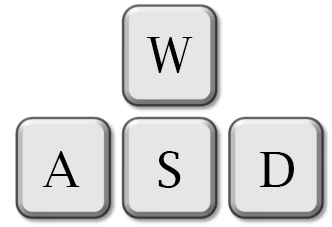
<style>
.page{position:relative;width:332px;height:227px;background:#ffffff}
.page>*{position:absolute;margin:0}
.t1{font:48.9px "LucidaBright";color:#000000}
</style>
<div class="page">
<p class="t1" style="left:147px;top:37px;width:46px;height:36px">W</p>
<p class="t1" style="left:43px;top:151px;width:37px;height:36px">A</p>
<p class="t1" style="left:158px;top:151px;width:23px;height:37px">S</p>
<p class="t1" style="left:260px;top:152px;width:34px;height:35px">D</p>
</div>
